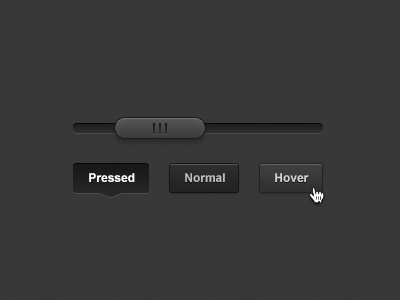
<style>
.page{position:relative;width:400px;height:300px;background:#383838}
.page>*{position:absolute;margin:0}
.t1{font:12px "Arial-BoldMT";color:#ffffff}
.t2{font:12px "Arial-BoldMT";color:#ffffff;text-transform:uppercase}
.t3{font:12px "Arial-BoldMT";color:#bcbcbc}
.t4{font:12px "Arial-BoldMT";color:#d0d0d0}
</style>
<div class="page">
<p class="t1" style="left:89px;top:173px;width:46px;height:9px"><span class="t2">P</span>ressed</p>
<p class="t3" style="left:185px;top:173px;width:40px;height:9px">Normal</p>
<p class="t4" style="left:275px;top:173px;width:34px;height:9px">Hover</p>
</div>
